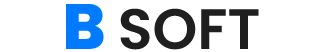
<style>
.page{position:relative;width:324px;height:52px;background:#ffffff}
.page>*{position:absolute;margin:0}
.t1{font:57px "Poppins-SemiBold";color:#1f1f1f}
.t2{font:64px "Poppins-ExtraBold";color:#007bff}
</style>
<div class="page">
<p class="t1" style="left:66px;top:4px;width:193px;height:46px"><span class="t2">B </span>SOFT</p>
</div>
